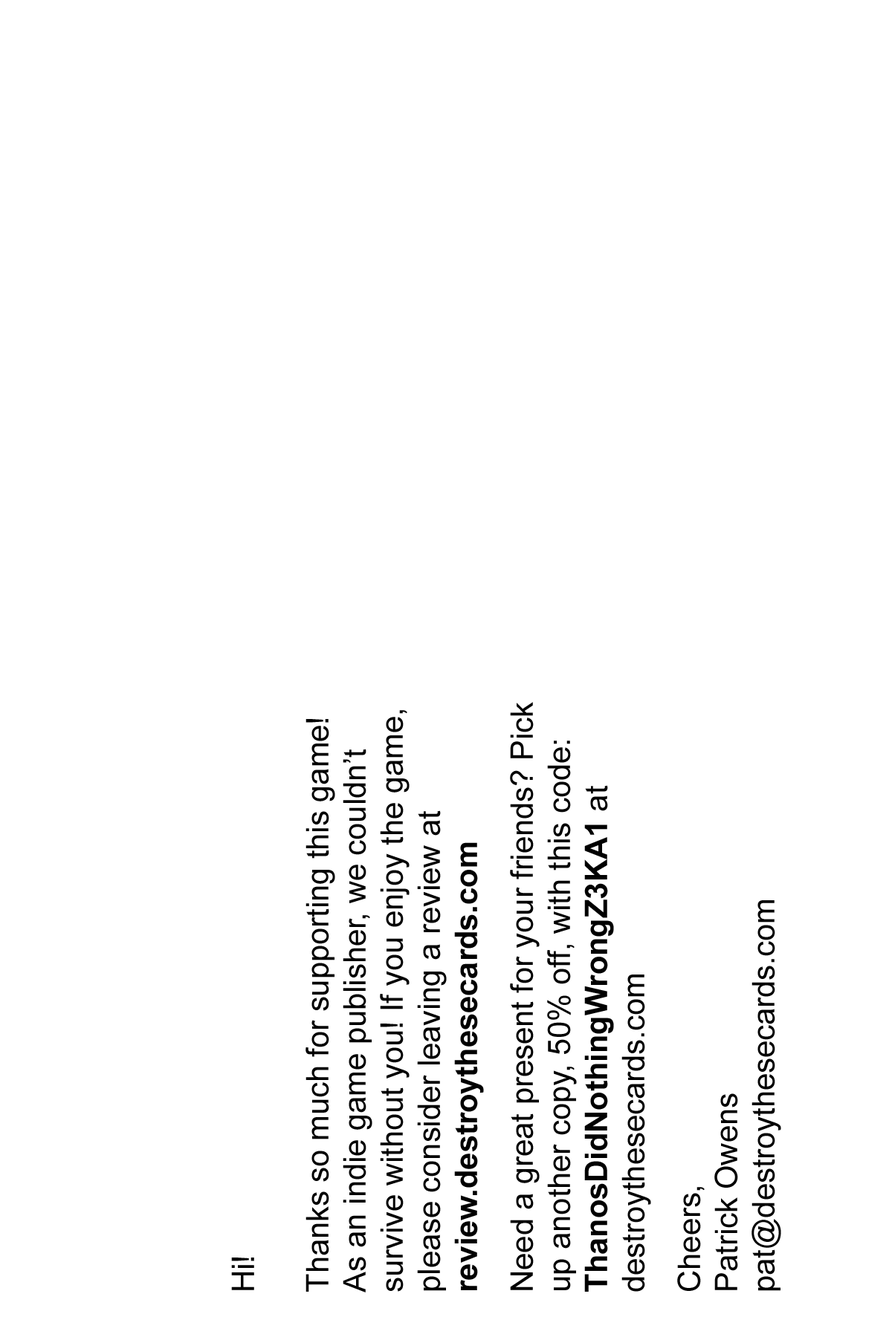
<style>
.page{position:relative;width:892px;height:1337px;background:#ffffff}
.page>*{position:absolute;margin:0}
.t1{font:31px "ArialMT";color:#000000}
.t2{font:31px "Arial-BoldMT";color:#000000}
.t3{font:31px/18.6px "ArialMT";color:#000000}
</style>
<div class="page">
<p class="t1" style="left:231px;top:702px;width:550px;height:591px;rotate:-90deg">Hi!<br><br>Thanks so much for supporting this game! As an indie game publisher, we couldn’t survive without you! If you enjoy the game, please consider leaving a review at <span class="t2">review.destroythesecards.com<br></span><span class="t3"><br></span>Need a great present for your friends? Pick up another copy, 50% off, with this code: <br><span class="t2">ThanosDidNothingWrongZ3KA1 </span>at destroythesecards.com<br><br>Cheers,<br>Patrick Owens<br>pat@destroythesecards.com</p>
</div>
